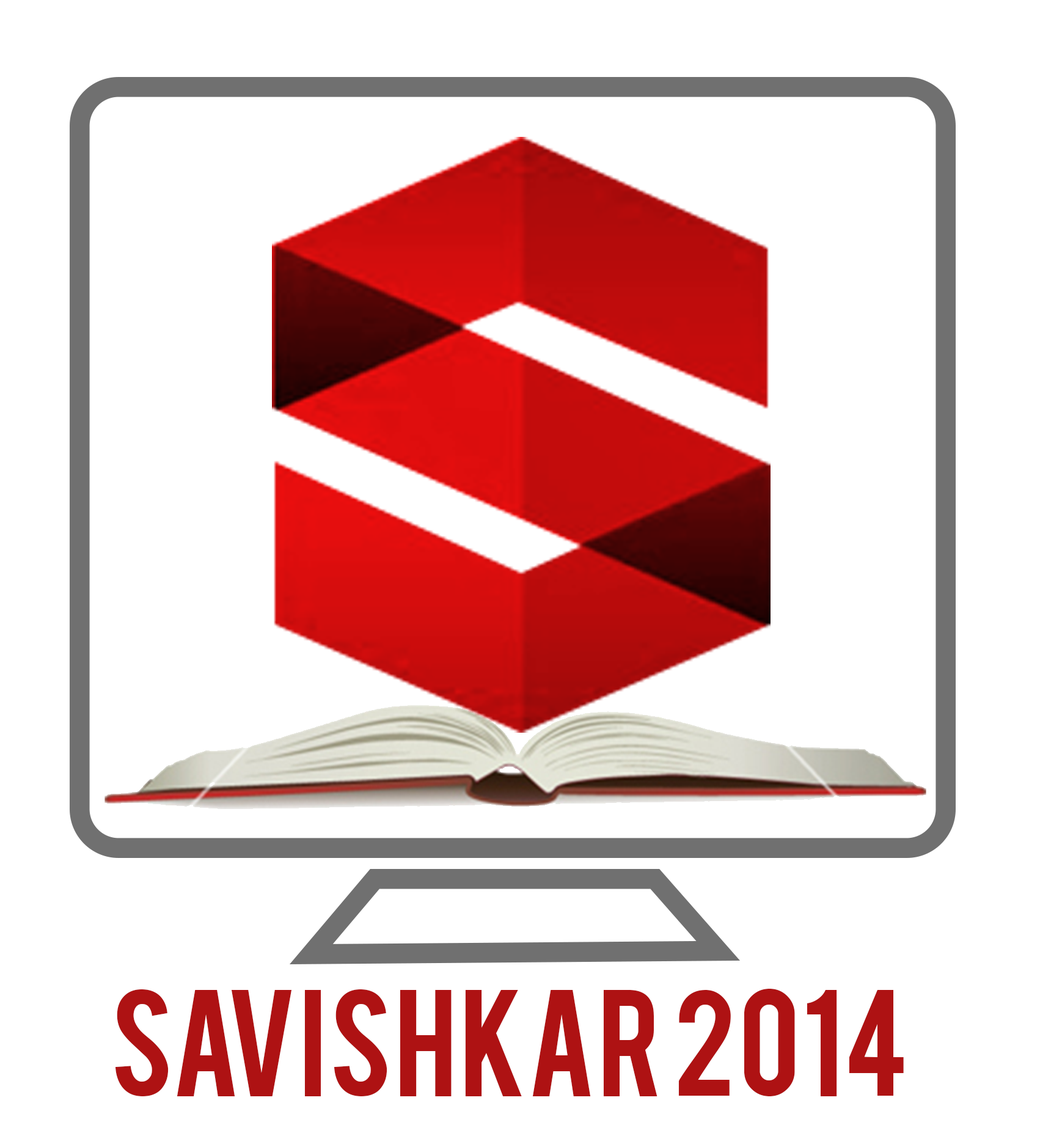
<style>
.page{position:relative;width:1040px;height:1147px;background:#ffffff}
.page>*{position:absolute;margin:0}
.t1{font:118.7px "Bebas";color:#ae1213}
</style>
<div class="page">
<p class="t1" style="left:115px;top:989px;width:789px;height:107px">SAVISHKAR 2014</p>
</div>
